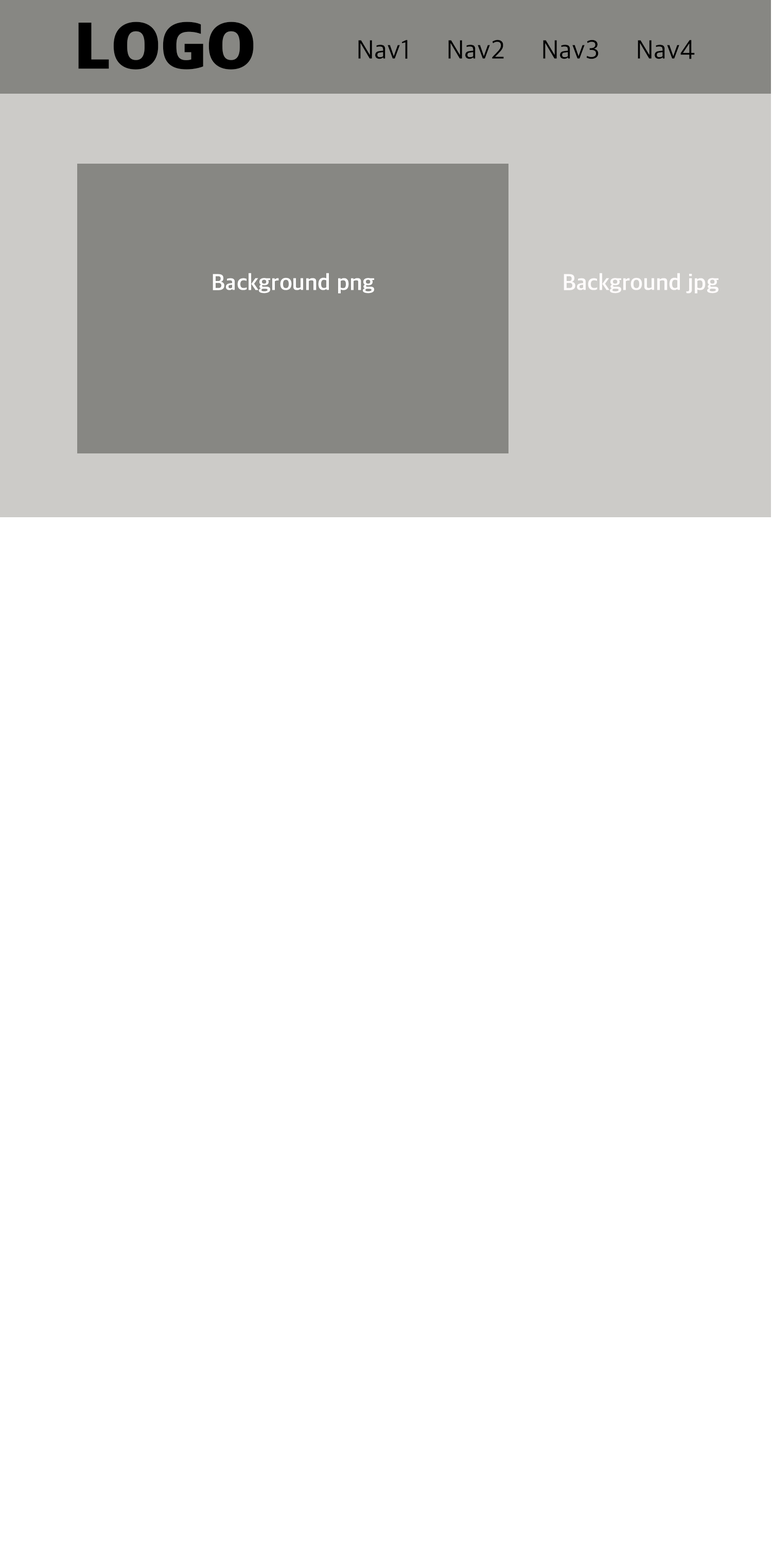
<style>
.page{position:relative;width:772px;height:1544px;background:#ffffff}
.page>*{position:absolute;margin:0}
.t1{font:68.5px "AppleSDGothicNeo-Heavy";color:#000000}
.t2{font:27.3px "AppleSDGothicNeo-Regular";color:#000000}
.t3{font:22.6px "AppleSDGothicNeo-Bold";color:#ffffff}
.t4{font:22.6px "AppleSDGothicNeo-Bold";color:#fefbfb}
</style>
<div class="page">
<p class="t1" style="left:78px;top:22px;width:176px;height:47px">LOGO</p>
<p class="t2" style="left:358px;top:40px;width:337px;height:19px">Nav1     Nav2     Nav3     Nav4</p>
<p class="t3" style="left:213px;top:273px;width:161px;height:20px">Background png</p>
<p class="t4" style="left:564px;top:273px;width:155px;height:20px">Background jpg</p>
</div>
